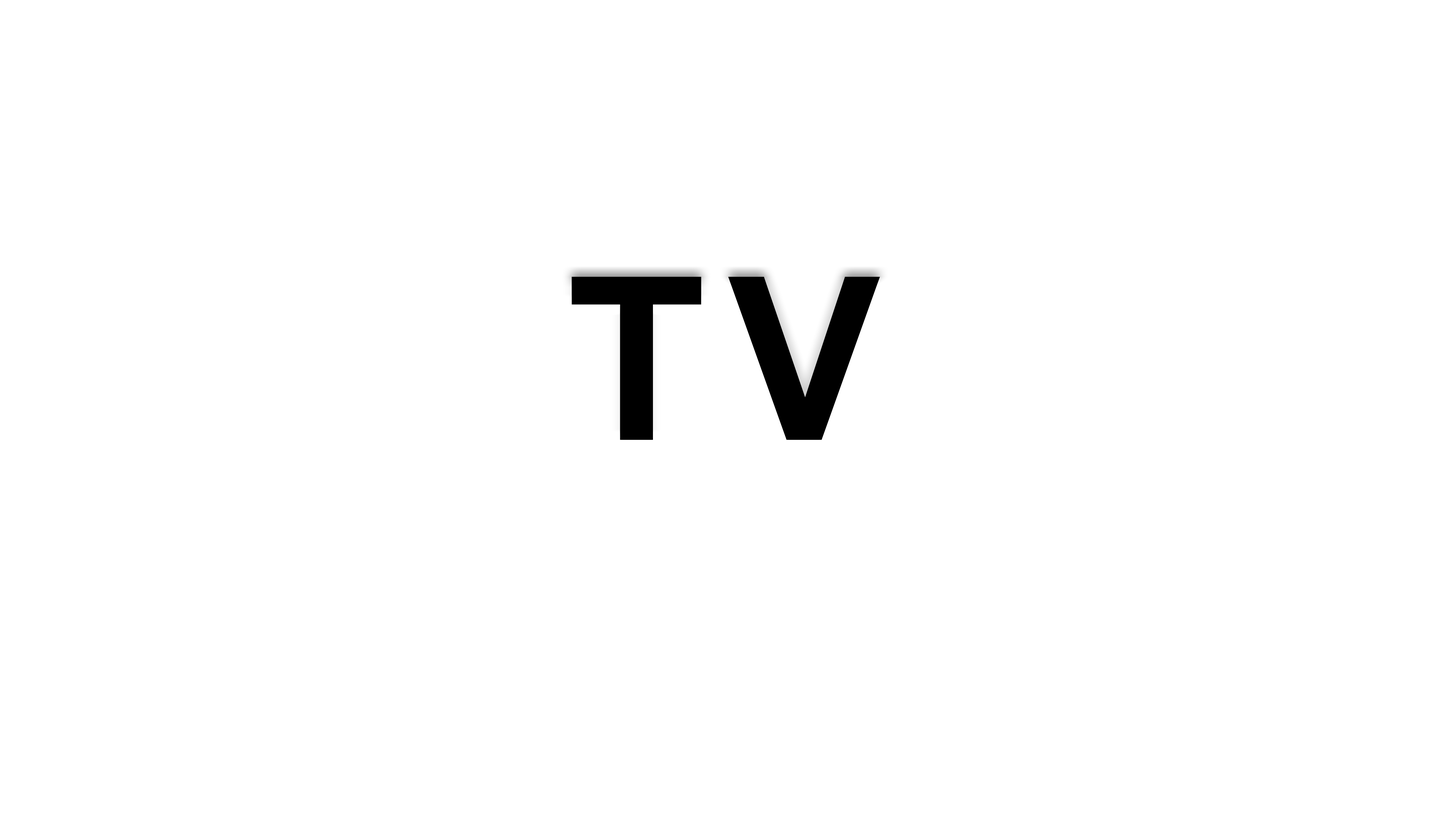
<style>
.page{position:relative;width:1456px;height:819px;background:#ffffff}
.page>*{position:absolute;margin:0}
.t1{font:227.5px "Arial-BoldMT";letter-spacing:0.1em;color:#000000}
</style>
<div class="page">
<p class="t1" style="left:571px;top:277px;width:309px;height:163px">TV</p>
</div>
